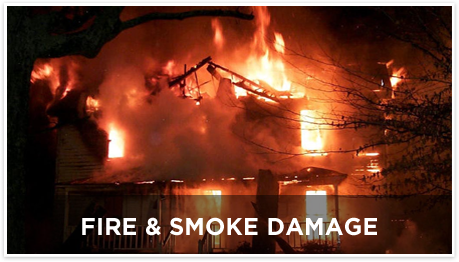
<style>
.page{position:relative;width:459px;height:262px}
.page>*{position:absolute;margin:0}
.t1{font:41.6px "GothamBold";letter-spacing:0.01em;color:#ffffff}
</style>
<div class="page">
<p class="t1" style="left:82px;top:217px;width:295px;height:19px">FIRE &amp; SMOKE DAMAGE</p>
</div>
